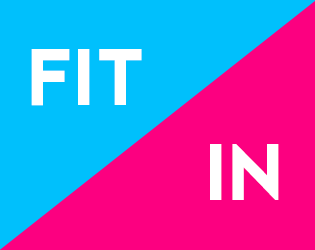
<style>
.page{position:relative;width:315px;height:250px;background:#fc0080}
.page>*{position:absolute;margin:0}
.t1{font:80px "Jaapokkisubtract-Regular";color:#ffffff}
</style>
<div class="page">
<p class="t1" style="left:31px;top:49px;width:111px;height:57px">FIT</p>
<p class="t1" style="left:210px;top:144px;width:69px;height:56px">IN</p>
</div>
